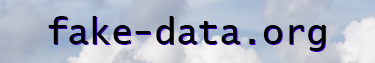
<style>
.page{position:relative;width:375px;height:63px}
.page>*{position:absolute;margin:0}
.t1{font:36px "LucidaConsole";color:#000000}
.t2{font:36px "LucidaConsole"}
</style>
<div class="page">
<p class="t1" style="left:48px;top:16px;width:277px;height:35px">fake-data.org</p>
<p class="t2" style="left:49px;top:17px;width:277px;height:35px">fake-data.org</p>
</div>
